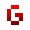
<style>
.page{position:relative;width:30px;height:30px;background:#ffffff}
.page>*{position:absolute;margin:0}
.t1{font:40px "MunroSmall"}
</style>
<div class="page">
<p class="t1" style="left:7px;top:5px;width:16px;height:20px">G</p>
</div>
